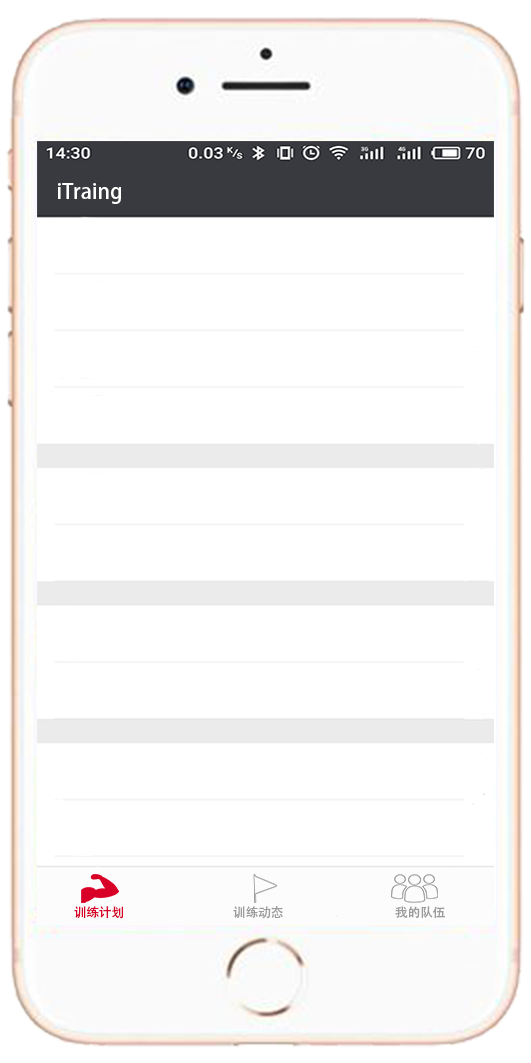
<style>
.page{position:relative;width:531px;height:1063px;background:#ffffff}
.page>*{position:absolute;margin:0}
.t1{font:20.8px "AdobeHeitiStd-Regular";color:#ffffff}
.t2{font:12.5px "AdobeHeitiStd-Regular";color:#9c9c9c}
.t3{font:12.5px "AdobeHeitiStd-Regular";color:#d80027}
</style>
<div class="page">
<p class="t1" style="left:58px;top:183px;width:63px;height:21px">iTraing</p>
<p class="t2" style="left:74px;top:906px;width:371px;height:13px"><span class="t3">训练计划                                       </span>训练动态                                        我的队伍</p>
</div>
